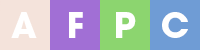
<style>
.page{position:relative;width:200px;height:50px;background:#a16fd5}
.page>*{position:absolute;margin:0}
.t1{font:34px "ITCAvantGardeStd-Bold";color:#ffffff}
</style>
<div class="page">
<p class="t1" style="left:11px;top:12px;width:26px;height:26px">A</p>
<p class="t1" style="left:69px;top:12px;width:14px;height:26px">F</p>
<p class="t1" style="left:116px;top:12px;width:20px;height:26px">P</p>
<p class="t1" style="left:162px;top:12px;width:26px;height:26px">C</p>
</div>
